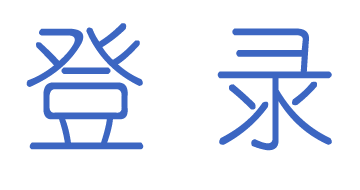
<style>
.page{position:relative;width:360px;height:190px;background:#ffffff}
.page>*{position:absolute;margin:0}
.t1{font:137.5px "YouYuan";color:#3c66c2;scale:0.91 1}
</style>
<div class="page">
<p class="t1" style="left:26px;top:23px;width:306px;height:128px">登 录</p>
</div>
